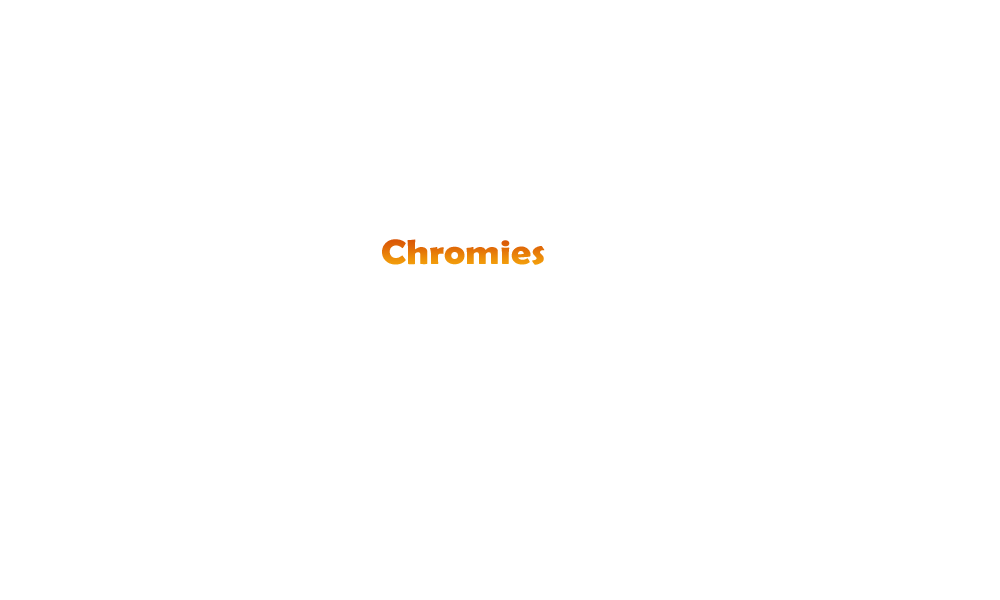
<style>
.page{position:relative;width:1000px;height:600px;background:#ffffff}
.page>*{position:absolute;margin:0}
.t1{font:35.2px "BerlinSansFBDemi-Bold";color:#e88109;scale:1.14 1}
</style>
<div class="page">
<p class="t1" style="left:382px;top:239px;width:163px;height:26px">Chromies</p>
</div>
